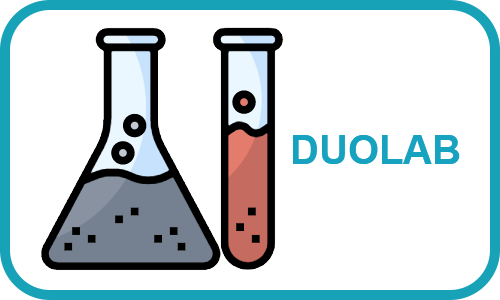
<style>
.page{position:relative;width:500px;height:300px;background:#ffffff}
.page>*{position:absolute;margin:0}
.t1{font:40px "Arial-BoldMT";color:#17a2c0}
</style>
<div class="page">
<p class="t1" style="left:293px;top:135px;width:167px;height:29px">DUOLAB</p>
</div>
